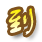
<style>
.page{position:relative;width:42px;height:42px;background:#ffffff}
.page>*{position:absolute;margin:0}
.t1{font:36px "FZSTK--GBK1-0"}
</style>
<div class="page">
<p class="t1" style="left:8px;top:8px;width:26px;height:27px">到</p>
</div>
